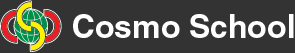
<style>
.page{position:relative;width:295px;height:53px;background:#333333}
.page>*{position:absolute;margin:0}
.t1{font:32px "Helvetica-Bold";color:#ffffff}
</style>
<div class="page">
<p class="t1" style="left:73px;top:14px;width:221px;height:24px">Cosmo School</p>
</div>
